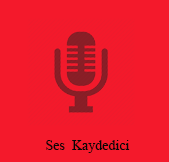
<style>
.page{position:relative;width:169px;height:162px;background:#f4192b}
.page>*{position:absolute;margin:0}
.t1{font:14px "TimesNewRomanPSMT";color:#060606}
</style>
<div class="page">
<p class="t1" style="left:46px;top:140px;width:84px;height:13px">Ses  Kaydedici</p>
</div>
